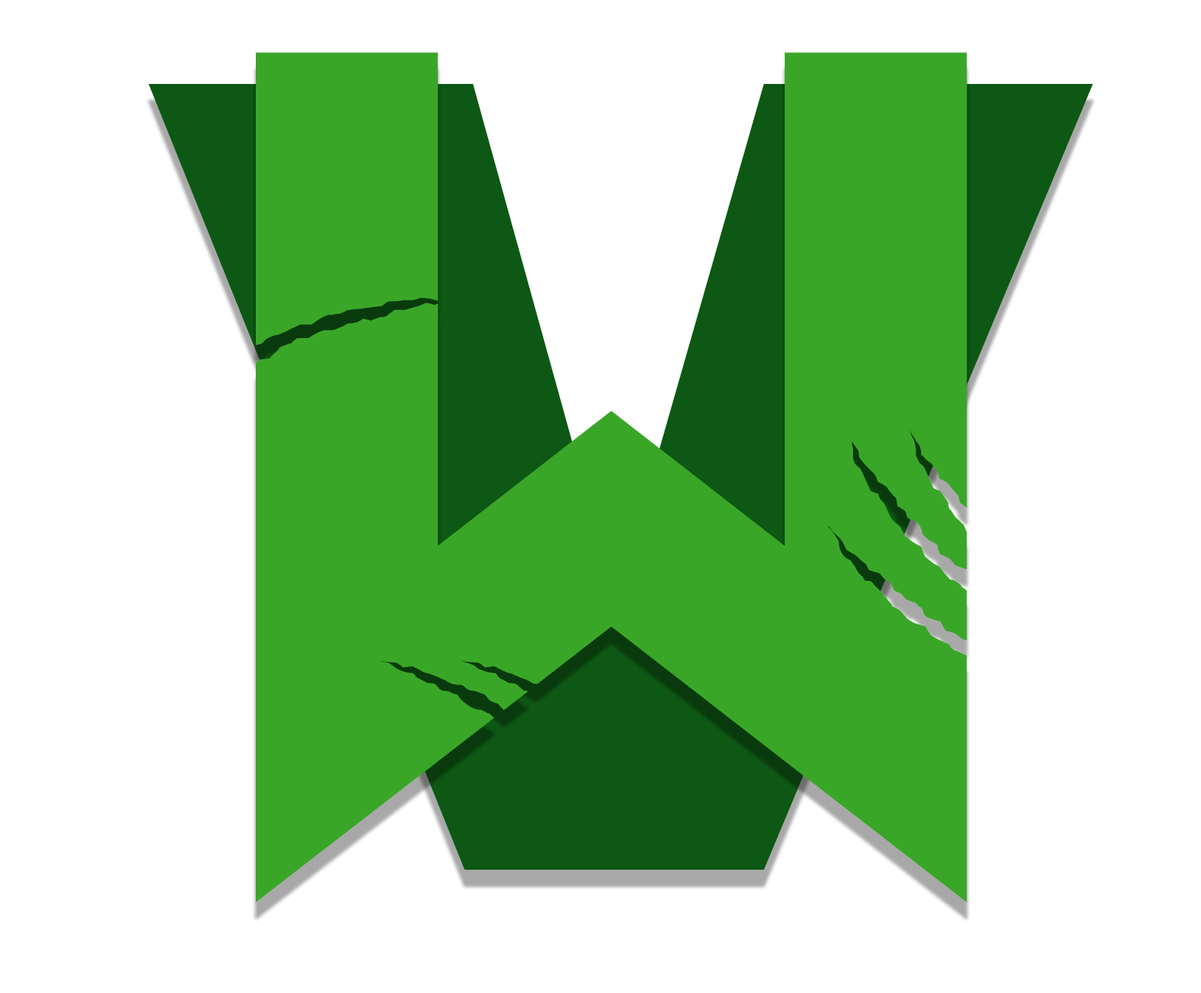
<style>
.page{position:relative;width:1201px;height:993px;background:#ffffff}
.page>*{position:absolute;margin:0}
.t1{font:971.3px "CakarMonyetBold";letter-spacing:0.05em;color:#3aa628;scale:1.12 1}
.t2{font:1153.9px "AbadiMT-CondensedExtraBold";letter-spacing:0.05em;scale:1.65 1}
</style>
<div class="page">
<p class="t1" style="left:256px;top:52px;width:711px;height:850px">W</p>
<p class="t2" style="left:148px;top:84px;width:945px;height:786px">V</p>
</div>
